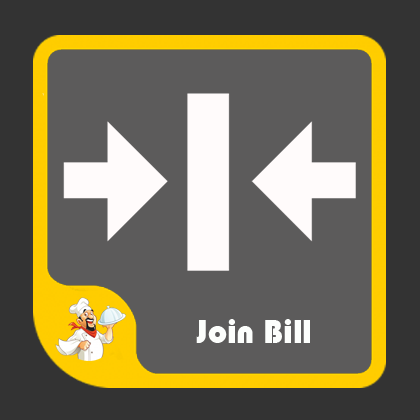
<style>
.page{position:relative;width:420px;height:420px;background:#5c5b5b}
.page>*{position:absolute;margin:0}
.t1{font:34px "Bauhaus93";color:#fcfefc}
</style>
<div class="page">
<p class="t1" style="left:196px;top:319px;width:114px;height:24px">Join Bill</p>
</div>
